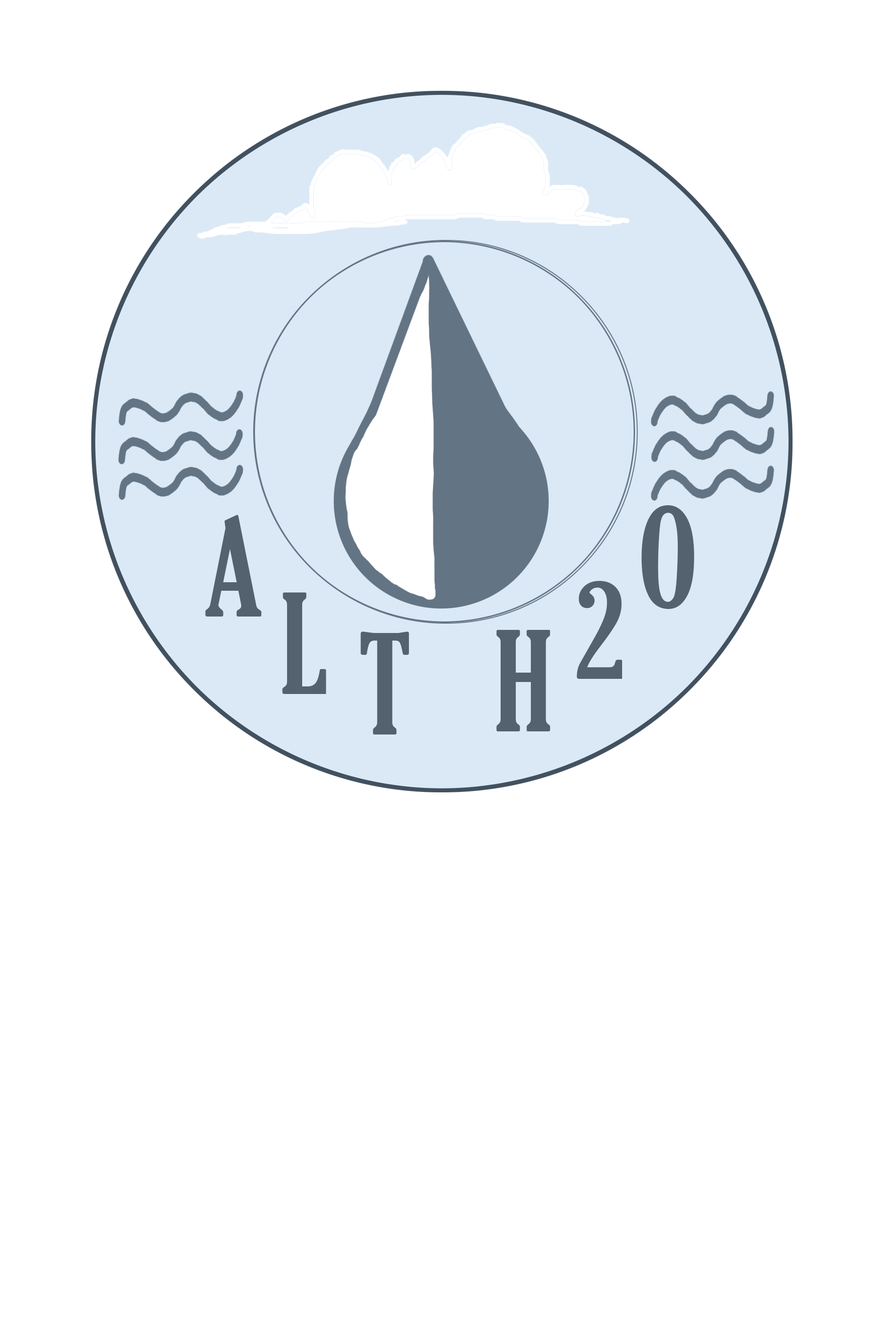
<style>
.page{position:relative;width:890px;height:1339px;background:#ffffff}
.page>*{position:absolute;margin:0}
.t1{font:133.6px "GloucesterMT-ExtraCondensed";color:#54626f}
</style>
<div class="page">
<p class="t1" style="left:642px;top:505px;width:53px;height:104px">O</p>
<p class="t1" style="left:205px;top:515px;width:57px;height:102px">A</p>
<p class="t1" style="left:577px;top:581px;width:45px;height:98px">2</p>
<p class="t1" style="left:282px;top:593px;width:44px;height:101px">L</p>
<p class="t1" style="left:496px;top:630px;width:55px;height:101px">H</p>
<p class="t1" style="left:361px;top:632px;width:48px;height:103px">T</p>
</div>
